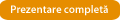
<style>
.page{position:relative;width:120px;height:20px;background:#e68d00}
.page>*{position:absolute;margin:0}
.t1{font:11px "MyriadPro-Semibold";color:#ffffff}
</style>
<div class="page">
<p class="t1" style="left:11px;top:5px;width:97px;height:11px">Prezentare completă</p>
</div>
